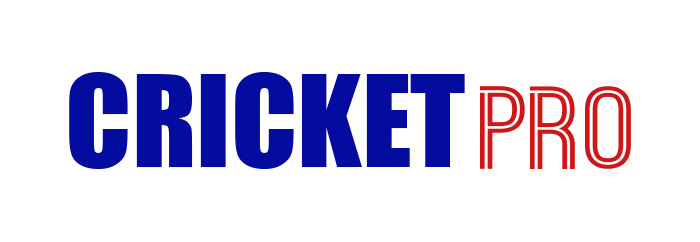
<style>
.page{position:relative;width:700px;height:242px;background:#ffffff}
.page>*{position:absolute;margin:0}
.t1{font:118.4px "Impact";color:#040c9f}
.t2{font:112.4px "OstrichSans-Bold";color:#ce1717;scale:1.17 1}
</style>
<div class="page">
<p class="t1" style="left:69px;top:72px;width:396px;height:97px">CRICKET</p>
<p class="t2" style="left:480px;top:86px;width:151px;height:83px">PRO</p>
</div>
